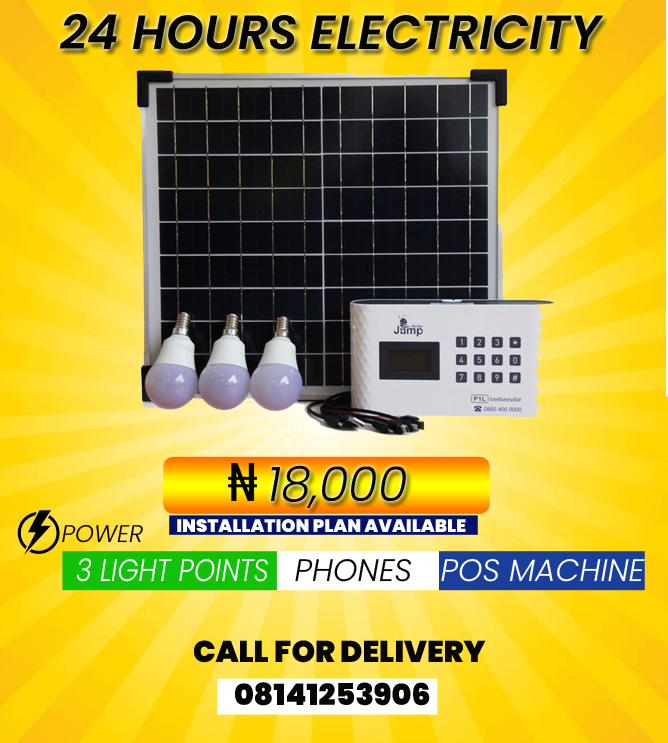
<style>
.page{position:relative;width:668px;height:743px}
.page>*{position:absolute;margin:0}
.t1{font:48px "Poppins-SemiBoldItalic";color:#060606;text-transform:uppercase}
.t2{font:48px "Poppins-LightItalic";color:#060606;text-transform:uppercase}
.t3{font:18px "Poppins-Black";color:#ffffff;text-transform:uppercase}
.t4{font:24px "Poppins-LightItalic";color:#060606;text-transform:uppercase}
.t5{font:31px "Poppins-LightItalic";color:#ffffff;text-transform:uppercase;scale:0.87 1}
.t6{font:31px "Poppins-LightItalic";color:#060606;text-transform:uppercase}
.t7{font:31px "Poppins-LightItalic";color:#ffffff;text-transform:uppercase}
.t8{font:30px "Poppins-Black";color:#060606;text-transform:uppercase}
</style>
<div class="page">
<p class="t1" style="left:59px;top:13px;width:545px;height:37px">24 hours electricity</p>
<p class="t2" style="left:270px;top:465px;width:136px;height:43px">18,000</p>
<p class="t3" style="left:177px;top:519px;width:289px;height:13px">installation plan available</p>
<p class="t4" style="left:62px;top:524px;width:81px;height:19px">power</p>
<p class="t5" style="left:76px;top:558px;width:192px;height:24px">3 light points</p>
<p class="t6" style="left:295px;top:558px;width:116px;height:24px">phones</p>
<p class="t7" style="left:441px;top:558px;width:204px;height:24px">pos machine</p>
<p class="t8" style="left:194px;top:640px;width:292px;height:23px">call for delivery</p>
<p class="t8" style="left:235px;top:682px;width:195px;height:24px">08141253906</p>
</div>
